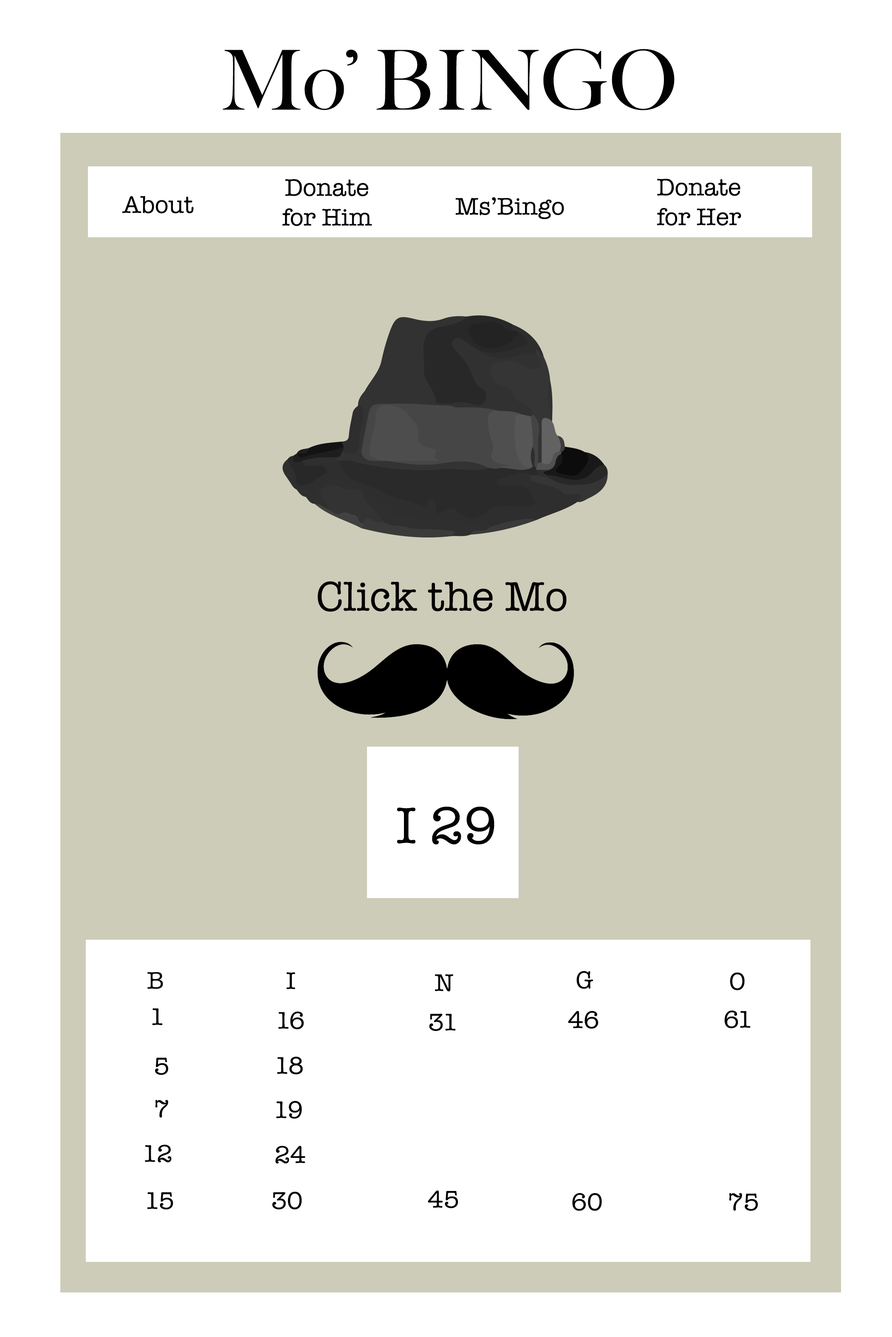
<style>
.page{position:relative;width:892px;height:1337px;background:#ffffff}
.page>*{position:absolute;margin:0}
.t1{font:83px "BigCaslon-Medium";color:#020202}
.t2{font:24.8px "AmericanTypewriter";color:#020202}
.t3{font:42.5px "AmericanTypewriter";color:#020202}
.t4{font:53.1px "AmericanTypewriter";color:#020202}
</style>
<div class="page">
<p class="t1" style="left:222px;top:48px;width:452px;height:62px">Mo’ BINGO</p>
<p class="t2" style="left:282px;top:179px;width:90px;height:47px;text-align:center">Donate<br>for Him</p>
<p class="t2" style="left:656px;top:179px;width:85px;height:47px;text-align:center">Donate<br>for Her</p>
<p class="t2" style="left:122px;top:196px;width:72px;height:18px">About</p>
<p class="t2" style="left:455px;top:197px;width:109px;height:23px">Ms’Bingo</p>
<p class="t3" style="left:318px;top:581px;width:248px;height:31px">Click the Mo</p>
<p class="t4" style="left:397px;top:807px;width:97px;height:38px">I 29</p>
<p class="t2" style="left:147px;top:972px;width:16px;height:17px">B</p>
<p class="t2" style="left:286px;top:972px;width:9px;height:18px">I</p>
<p class="t2" style="left:435px;top:974px;width:18px;height:18px">N</p>
<p class="t2" style="left:576px;top:971px;width:17px;height:18px">G</p>
<p class="t2" style="left:729px;top:973px;width:15px;height:18px">O</p>
<p class="t2" style="left:152px;top:1008px;width:11px;height:18px">1</p>
<p class="t2" style="left:278px;top:1012px;width:26px;height:18px">16</p>
<p class="t2" style="left:429px;top:1014px;width:27px;height:17px">31</p>
<p class="t2" style="left:568px;top:1011px;width:30px;height:18px">46</p>
<p class="t2" style="left:724px;top:1010px;width:26px;height:19px">61</p>
<p class="t2" style="left:155px;top:1058px;width:13px;height:17px">5</p>
<p class="t2" style="left:277px;top:1057px;width:26px;height:18px">18</p>
<p class="t2" style="left:155px;top:1100px;width:13px;height:18px">7</p>
<p class="t2" style="left:276px;top:1101px;width:26px;height:18px">19</p>
<p class="t2" style="left:145px;top:1145px;width:27px;height:18px">12</p>
<p class="t2" style="left:275px;top:1146px;width:30px;height:18px">24</p>
<p class="t2" style="left:147px;top:1193px;width:26px;height:17px">15</p>
<p class="t2" style="left:272px;top:1192px;width:30px;height:18px">30</p>
<p class="t2" style="left:428px;top:1191px;width:30px;height:18px">45</p>
<p class="t2" style="left:572px;top:1193px;width:30px;height:18px">60</p>
<p class="t2" style="left:729px;top:1193px;width:29px;height:18px">75</p>
</div>
